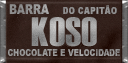
<style>
.page{position:relative;width:128px;height:63px}
.page>*{position:absolute;margin:0}
.t1{font:13.5px "Arial-Black";color:#a1a09f;scale:0.77 1}
.t2{font:9.9px "Arial-Black";color:#a1a09f;text-transform:uppercase;scale:0.77 1}
.t3{font:9.7px "Arial-Black";color:#a1a09f;scale:0.76 1}
</style>
<div class="page">
<p class="t1" style="left:9px;top:4px;width:40px;height:10px">BARRA</p>
<p class="t2" style="left:63px;top:5px;width:54px;height:9px">DO CAPITãO</p>
<p class="t3" style="left:8px;top:49px;width:112px;height:7px">CHOCOLATE E VELOCIDADE</p>
</div>
